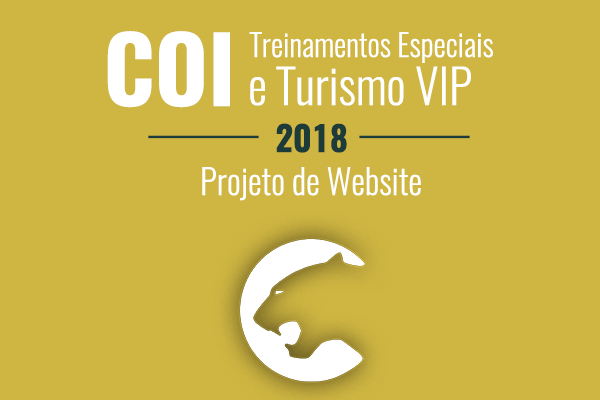
<style>
.page{position:relative;width:600px;height:400px;background:#cfb642}
.page>*{position:absolute;margin:0}
.t1{font:91.1px "Oswald-Bold";color:#ffffff}
.t2{font:30.8px "Oswald-Light";color:#ffffff}
.t3{font:47.6px "Oswald-Light";color:#ffffff}
.t4{font:34.4px "Oswald-Bold";color:#1d3b39}
.t5{font:34.4px "Oswald-Light";color:#ffffff}
</style>
<div class="page">
<p class="t1" style="left:107px;top:31px;width:123px;height:77px">COI</p>
<p class="t2" style="left:249px;top:32px;width:244px;height:31px">Treinamentos Especiais</p>
<p class="t3" style="left:250px;top:66px;width:221px;height:40px">e Turismo VIP</p>
<p class="t4" style="left:276px;top:123px;width:71px;height:30px">2018</p>
<p class="t5" style="left:202px;top:167px;width:219px;height:34px">Projeto de Website</p>
</div>
